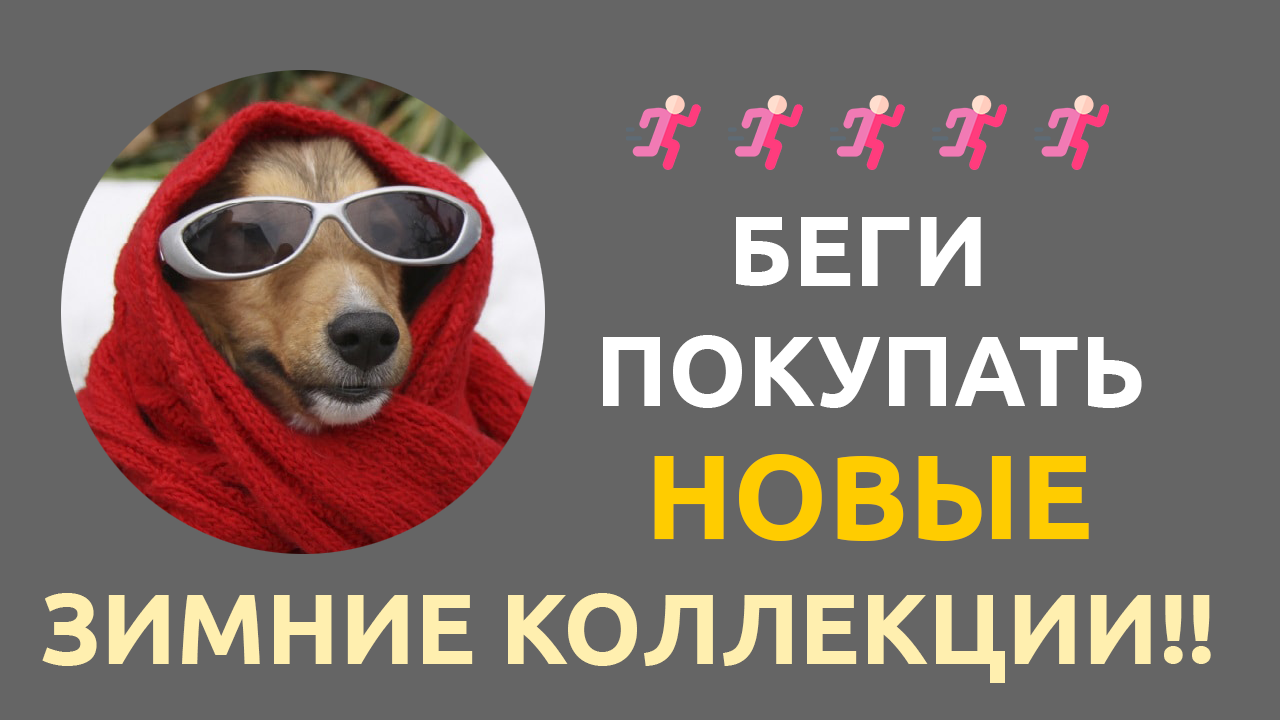
<style>
.page{position:relative;width:1280px;height:720px;background:#656565}
.page>*{position:absolute;margin:0}
.t1{font:100px "Ubuntu-Bold";color:#ffffff}
.t2{font:120px "Ubuntu-Bold";color:#ffcc00}
.t3{font:100px "Ubuntu-Bold";color:#ffefaf}
</style>
<div class="page">
<p class="t1" style="left:603px;top:217px;width:539px;height:191px;text-align:center">БЕГИ<br> ПОКУПАТЬ</p>
<p class="t2" style="left:654px;top:454px;width:435px;height:87px">НОВЫЕ</p>
<p class="t3" style="left:42px;top:593px;width:1169px;height:90px">ЗИМНИЕ КОЛЛЕКЦИИ!!</p>
</div>
